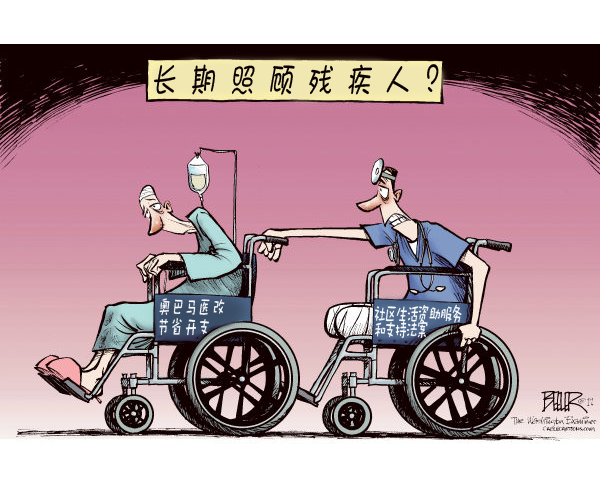
<style>
.page{position:relative;width:600px;height:495px;background:#ffffff}
.page>*{position:absolute;margin:0}
.t1{font:34.5px "DFPShaoNvW5";letter-spacing:0.56em;color:#090000;font-style:italic;scale:0.72 1}
.t2{font:20.7px/20.8px "DFPWaWaW5";letter-spacing:0.36em;color:#fbfbfd;font-style:italic;scale:0.6 1}
.t3{font:20.7px/16.7px "DFPWaWaW5";letter-spacing:0.08em;color:#fbfbfd;font-style:italic;scale:0.6 1}
</style>
<div class="page">
<p class="t1" style="left:154px;top:64px;width:285px;height:31px">长期照顾残疾人？</p>
<p class="t2" style="left:159px;top:298px;width:66px;height:38px">奥巴马医改<br>节省开支</p>
<p class="t3" style="left:374px;top:304px;width:88px;height:34px">社区生活资助服务<br>和支持法案</p>
</div>
